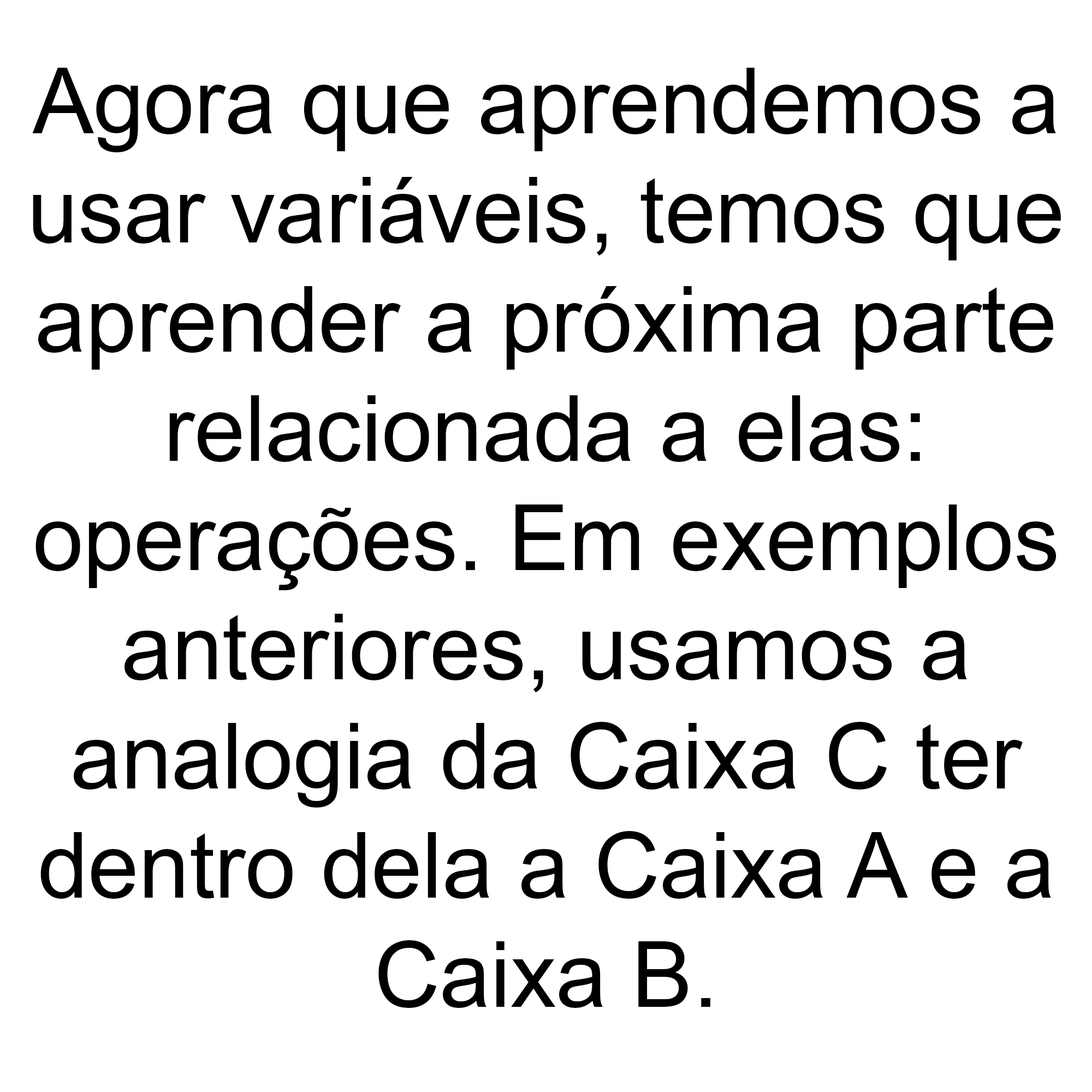
<style>
.page{position:relative;width:1092px;height:1092px;background:#ffffff}
.page>*{position:absolute;margin:0}
.t1{font:91px "ArialMT";color:#000000}
</style>
<div class="page">
<p class="t1" style="left:32px;top:68px;width:1029px;height:940px;text-align:center">Agora que aprendemos a<br>usar variáveis, temos que<br>aprender a próxima parte<br>relacionada a elas:<br>operações. Em exemplos<br>anteriores, usamos a<br>analogia da Caixa C ter<br>dentro dela a Caixa A e a<br>Caixa B.</p>
</div>
